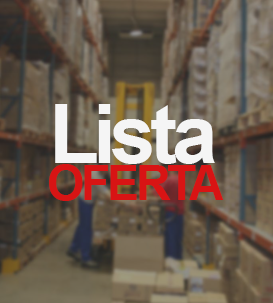
<style>
.page{position:relative;width:273px;height:303px}
.page>*{position:absolute;margin:0}
.t1{font:82px "Arial-BoldMT";letter-spacing:-0.07em;color:#f5f5f5}
.t2{font:48px "Arial-BoldMT";letter-spacing:-0.07em;color:#d81414}
</style>
<div class="page">
<p class="t1" style="left:55px;top:104px;width:160px;height:60px">Lista</p>
<p class="t2" style="left:49px;top:164px;width:175px;height:37px">OFERTA</p>
</div>
